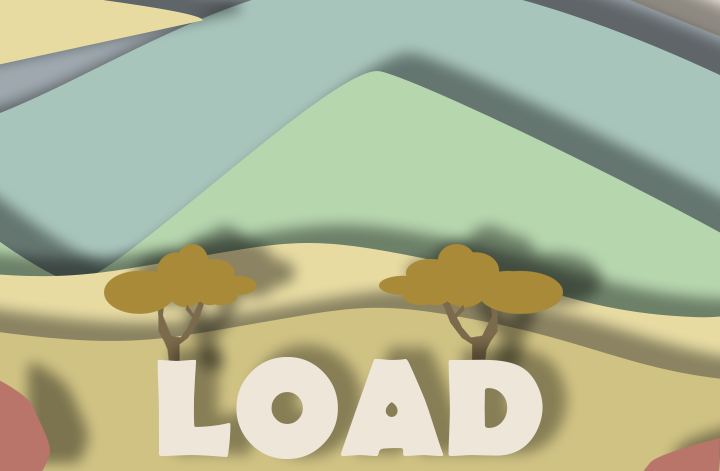
<style>
.page{position:relative;width:720px;height:471px;background:#a8c5bc}
.page>*{position:absolute;margin:0}
.t1{font:140px "BerlinSansFB-Bold";color:#ede6d9}
</style>
<div class="page">
<p class="t1" style="left:157px;top:357px;width:386px;height:102px">LOAD</p>
</div>
